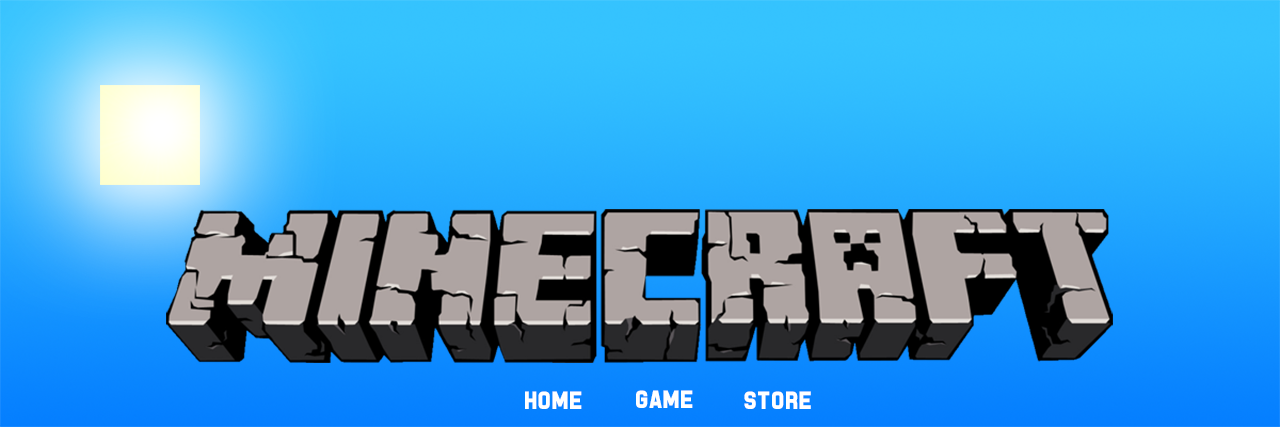
<style>
.page{position:relative;width:1280px;height:427px}
.page>*{position:absolute;margin:0}
.t1{font:25.6px "PistonPressure";letter-spacing:0.05em;color:#ffffff}
</style>
<div class="page">
<p class="t1" style="left:636px;top:390px;width:57px;height:18px">game</p>
<p class="t1" style="left:525px;top:391px;width:57px;height:18px">home</p>
<p class="t1" style="left:744px;top:391px;width:67px;height:18px">store</p>
</div>
